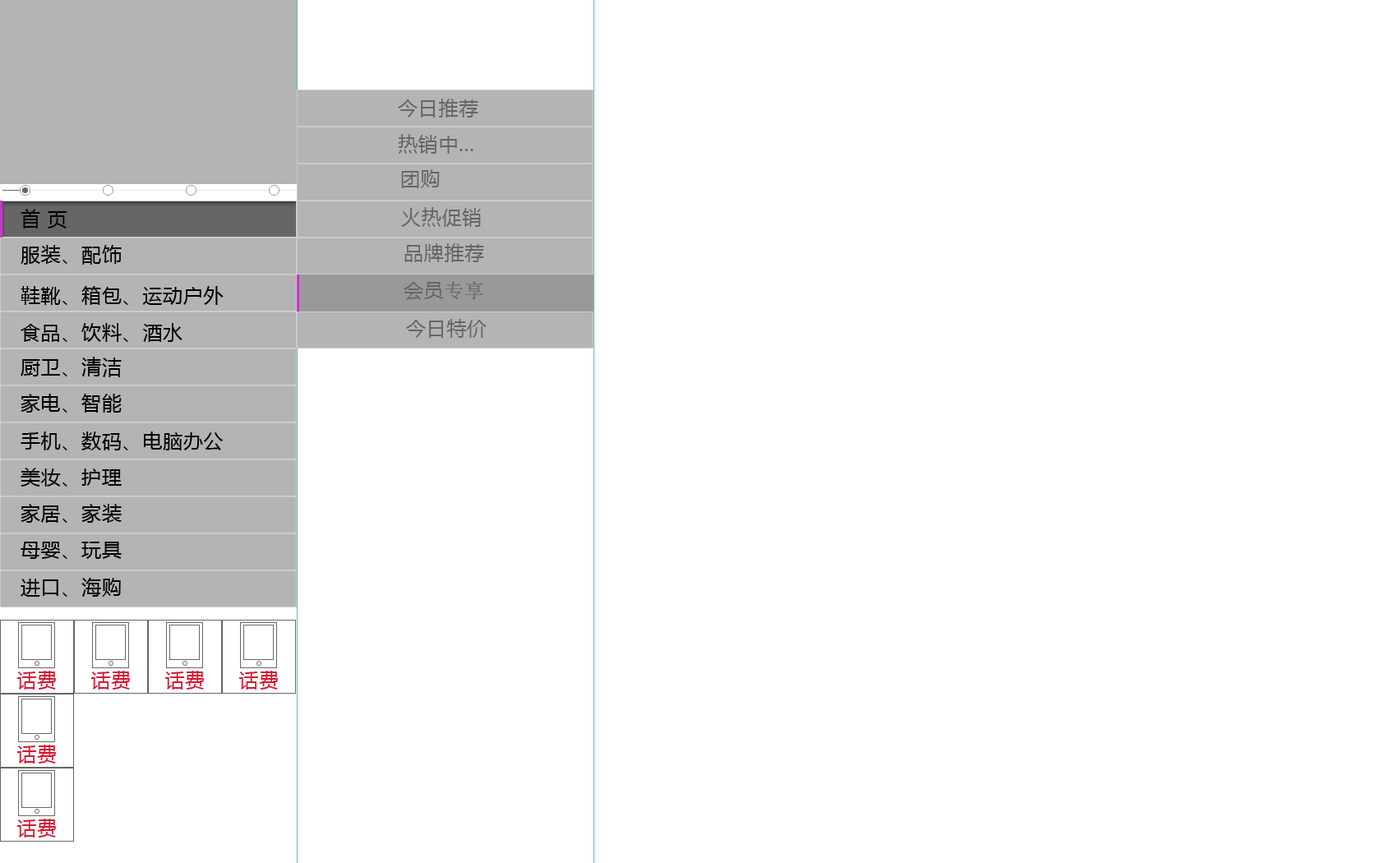
<style>
.page{position:relative;width:1381px;height:863px;background:#ffffff}
.page>*{position:absolute;margin:0}
.t1{font:19.7px "MicrosoftYaHei";letter-spacing:0.03em;color:#666666}
.t2{font:19.7px "MicrosoftYaHei";letter-spacing:0.03em;color:#000000}
.t3{font:19.7px "SimSun";letter-spacing:0.03em;color:#666666}
.t4{font:19.7px "MicrosoftYaHei";letter-spacing:0.03em;color:#d71631}
</style>
<div class="page">
<p class="t1" style="left:398px;top:99px;width:81px;height:19px">今日推荐</p>
<p class="t1" style="left:398px;top:134px;width:76px;height:20px">热销中...</p>
<p class="t1" style="left:401px;top:169px;width:39px;height:19px">团购</p>
<p class="t2" style="left:21px;top:209px;width:46px;height:20px">首 页</p>
<p class="t1" style="left:401px;top:207px;width:80px;height:20px">火热促销</p>
<p class="t2" style="left:21px;top:245px;width:101px;height:20px">服装、配饰</p>
<p class="t1" style="left:405px;top:243px;width:79px;height:19px">品牌推荐</p>
<p class="t1" style="left:404px;top:281px;width:79px;height:19px">会员<span class="t3">专享</span></p>
<p class="t2" style="left:21px;top:286px;width:203px;height:19px">鞋靴、箱包、运动户外</p>
<p class="t2" style="left:21px;top:323px;width:162px;height:19px">食品、饮料、酒水</p>
<p class="t1" style="left:406px;top:319px;width:81px;height:19px">今日特价</p>
<p class="t2" style="left:21px;top:357px;width:101px;height:20px">厨卫、清洁</p>
<p class="t2" style="left:21px;top:394px;width:101px;height:19px">家电、智能</p>
<p class="t2" style="left:21px;top:432px;width:203px;height:19px">手机、数码、电脑办公</p>
<p class="t2" style="left:21px;top:468px;width:101px;height:19px">美妆、护理</p>
<p class="t2" style="left:21px;top:504px;width:101px;height:19px">家居、家装</p>
<p class="t2" style="left:21px;top:542px;width:101px;height:17px">母婴、玩具</p>
<p class="t2" style="left:21px;top:578px;width:100px;height:19px">进口、海购</p>
<p class="t4" style="left:17px;top:671px;width:39px;height:19px">话费</p>
<p class="t4" style="left:91px;top:671px;width:39px;height:19px">话费</p>
<p class="t4" style="left:165px;top:671px;width:39px;height:19px">话费</p>
<p class="t4" style="left:239px;top:671px;width:39px;height:19px">话费</p>
<p class="t4" style="left:17px;top:745px;width:39px;height:19px">话费</p>
<p class="t4" style="left:17px;top:819px;width:39px;height:19px">话费</p>
</div>
